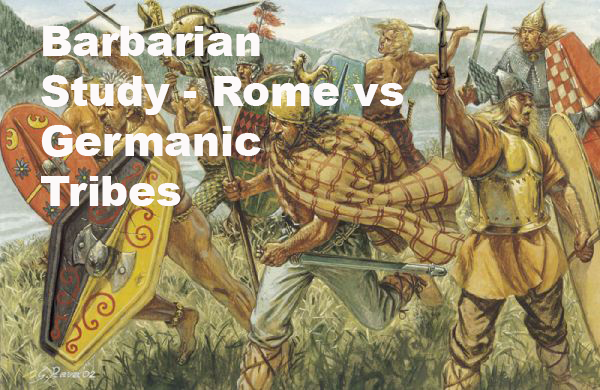
<style>
.page{position:relative;width:600px;height:390px}
.page>*{position:absolute;margin:0}
.t1{font:41.7px "Arial-Black";color:#fcf9f9}
</style>
<div class="page">
<p class="t1" style="left:41px;top:26px;width:363px;height:180px">Barbarian <br>Study - Rome vs Germanic <br>Tribes</p>
</div>
